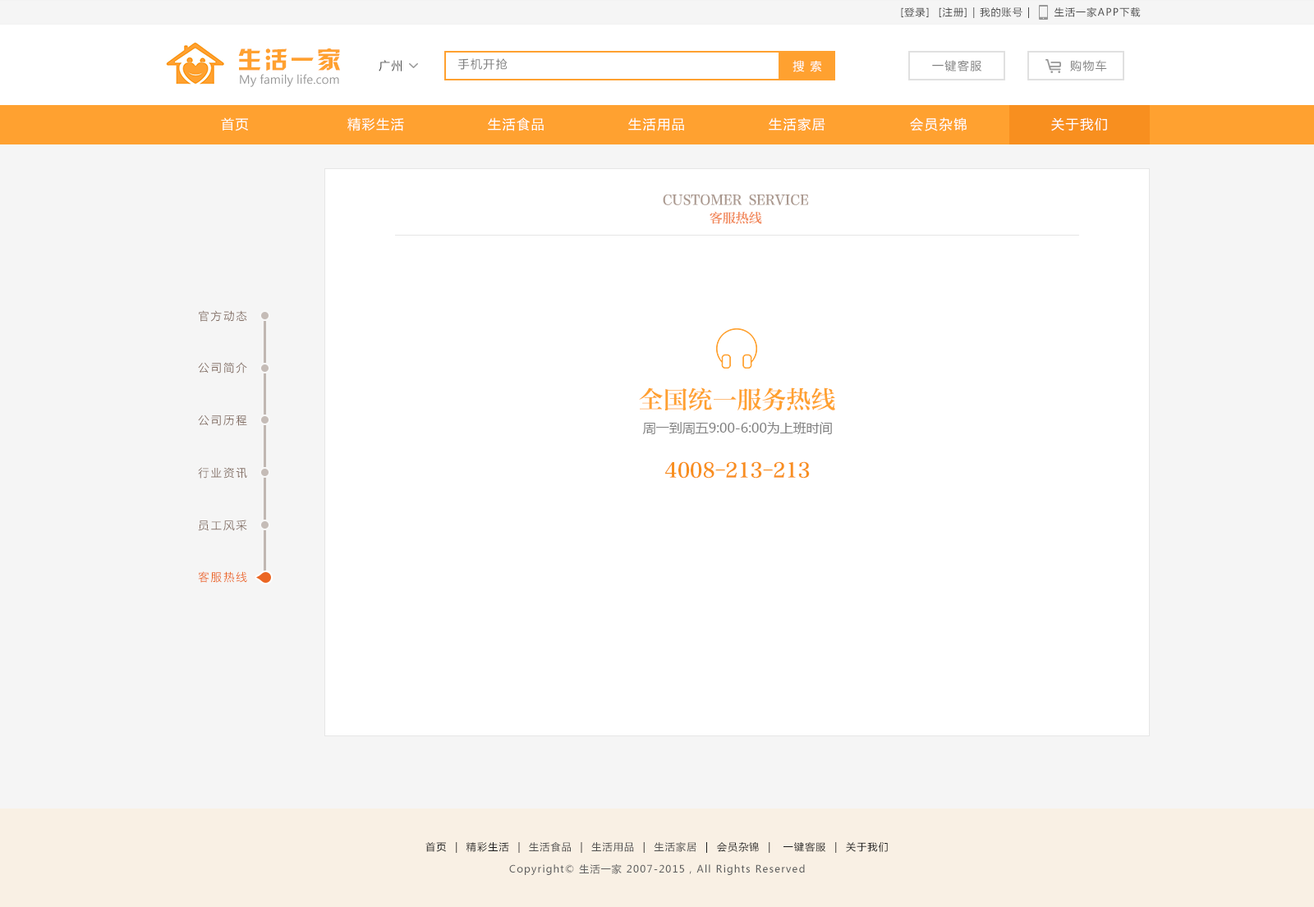
<style>
.page{position:relative;width:1314px;height:907px;background:#ffffff}
.page>*{position:absolute;margin:0}
.t1{font:9.9px "MicrosoftYaHei";letter-spacing:0.1em;color:#4d4d4d}
.t2{font:23.8px "HYk2gj";letter-spacing:0.1em;color:#ffa130}
.t3{font:11.5px "MicrosoftYaHei";letter-spacing:0.1em;color:#4d4d4d}
.t4{font:11.5px "MicrosoftYaHei";letter-spacing:0.1em;color:#808080}
.t5{font:11.5px "MicrosoftYaHei";letter-spacing:0.1em;color:#ffffff}
.t6{font:11.5px "MicrosoftYaHei";color:#999999}
.t7{font:13.1px "MicrosoftYaHei";letter-spacing:0.1em;color:#ffffff}
.t8{font:13.5px "MicrosoftYaHei";letter-spacing:0.1em;color:#ffffff}
.t9{font:13.2px/19.7px "FZZHYSJW--GB1-0";color:#aa988e;text-transform:uppercase}
.t10{font:13.2px/19.7px "FZZHYSJW--GB1-0";color:#f18555}
.t11{font:11.5px "STHeitiSC-Light";letter-spacing:0.1em;color:#816c61}
.t12{font:24.6px "FZZHYSJW--GB1-0";color:#ffa130}
.t13{font:13.1px "MicrosoftYaHei";color:#808080}
.t14{font:19.7px "FZZHYSJW--GB1-0";color:#f88f1f}
.t15{font:11.5px "STHeitiSC-Light";letter-spacing:0.1em;color:#eb6926}
.t16{font:9.9px "MicrosoftYaHei";letter-spacing:0.1em;color:#1a1a1a}
.t17{font:9.9px "MicrosoftYaHei";letter-spacing:0.1em;color:#5e5e5e}
</style>
<div class="page">
<p class="t1" style="left:901px;top:7px;width:240px;height:11px">[登录]  [注册] | 我的账号 |      生活一家APP下载</p>
<p class="t2" style="left:238px;top:48px;width:102px;height:23px">生活一家</p>
<p class="t3" style="left:379px;top:60px;width:23px;height:11px">广州</p>
<p class="t4" style="left:457px;top:58px;width:51px;height:12px">手机开抢</p>
<p class="t5" style="left:793px;top:60px;width:29px;height:12px">搜 索</p>
<p class="t4" style="left:932px;top:60px;width:50px;height:11px">一键客服</p>
<p class="t4" style="left:1070px;top:60px;width:37px;height:11px">购物车</p>
<p class="t6" style="left:240px;top:74px;width:99px;height:13px">My family life.com</p>
<p class="t7" style="left:221px;top:117px;width:27px;height:14px">首页</p>
<p class="t7" style="left:347px;top:117px;width:57px;height:14px">精彩生活</p>
<p class="t7" style="left:488px;top:117px;width:56px;height:14px">生活食品</p>
<p class="t7" style="left:628px;top:117px;width:56px;height:14px">生活用品</p>
<p class="t7" style="left:769px;top:117px;width:56px;height:14px">生活家居</p>
<p class="t8" style="left:910px;top:117px;width:57px;height:14px">会员杂锦</p>
<p class="t7" style="left:1051px;top:117px;width:56px;height:14px">关于我们</p>
<p class="t9" style="left:663px;top:194px;width:146px;height:30px;text-align:center">customer service<br><span class="t10">客服热线</span></p>
<p class="t11" style="left:199px;top:310px;width:48px;height:12px">官方动态</p>
<p class="t11" style="left:198px;top:362px;width:49px;height:12px">公司简介</p>
<p class="t12" style="left:639px;top:388px;width:196px;height:23px">全国统一服务热线</p>
<p class="t11" style="left:198px;top:415px;width:49px;height:11px">公司历程</p>
<p class="t13" style="left:642px;top:422px;width:190px;height:12px">周一到周五9:00-6:00为上班时间</p>
<p class="t14" style="left:665px;top:462px;width:145px;height:17px">4008-213-213</p>
<p class="t11" style="left:198px;top:467px;width:49px;height:12px">行业资讯</p>
<p class="t11" style="left:198px;top:520px;width:49px;height:11px">员工风采</p>
<p class="t15" style="left:198px;top:572px;width:49px;height:11px">客服热线</p>
<p class="t16" style="left:425px;top:842px;width:463px;height:11px">首页  |  精彩生活  |  <span class="t1">生活食品</span>  |  <span class="t1">生活用品</span>  |  <span class="t1">生活家居</span>  |  会员杂锦  |   一键客服  |  关于我们</p>
<p class="t17" style="left:509px;top:864px;width:296px;height:11px">Copyright© 生活一家 2007-2015，All Rights Reserved</p>
</div>
